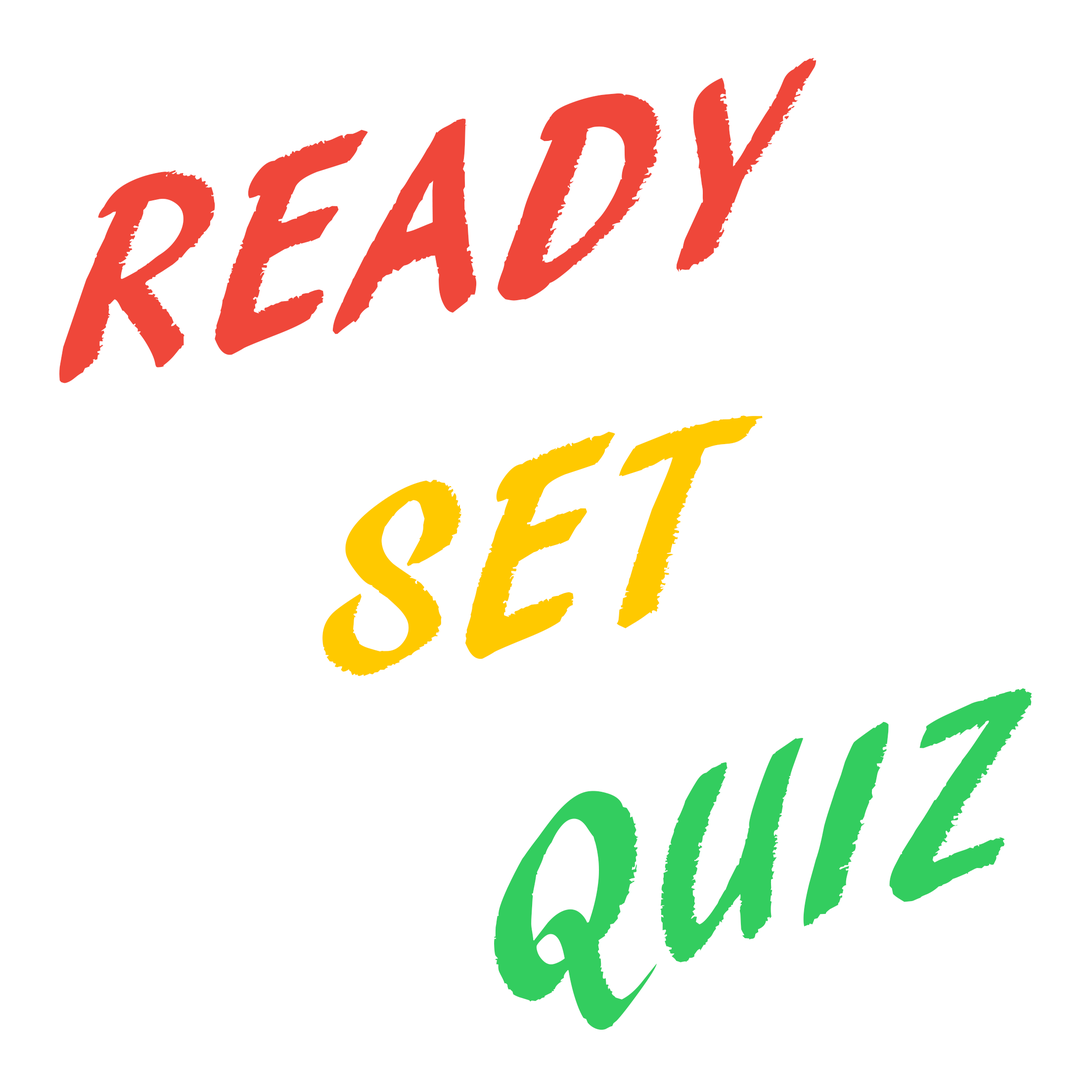
<style>
.page{position:relative;width:1092px;height:1092px;background:#ffffff}
.page>*{position:absolute;margin:0}
.t1{font:273px "ARBLANCA";color:#ef473a}
.t2{font:273px "ARBLANCA";color:#ffc900}
.t3{font:273px "ARBLANCA";color:#33cd5f}
</style>
<div class="page">
<p class="t1" style="left:59px;top:58px;width:758px;height:325px;rotate:-10deg">READY</p>
<p class="t2" style="left:322px;top:415px;width:441px;height:261px;rotate:-11deg">SET</p>
<p class="t3" style="left:494px;top:688px;width:538px;height:342px;rotate:-14deg">QUIZ</p>
</div>
